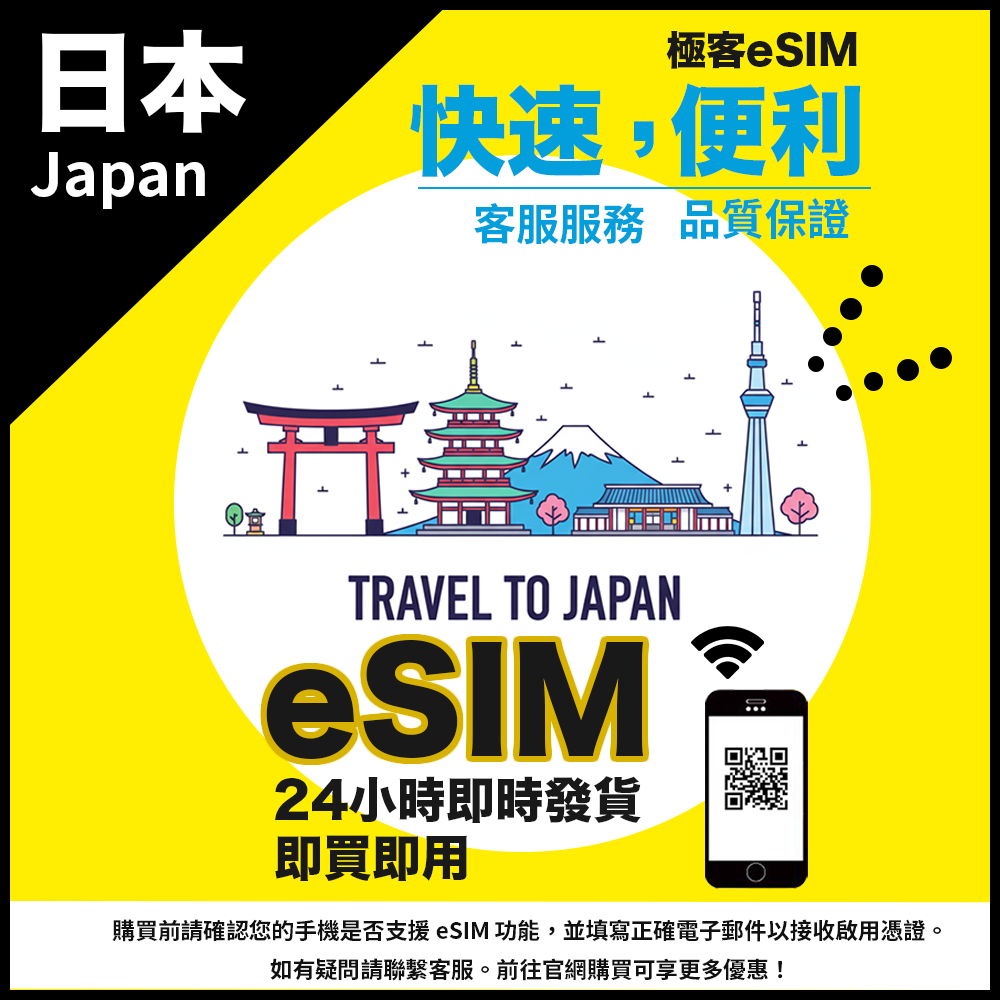
<style>
.page{position:relative;width:1000px;height:1000px;background:#ffee02}
.page>*{position:absolute;margin:0}
.t1{font:109.8px "HiraKakuStdN-W8";color:#ffffff}
.t2{font:40.1px "HiraKakuStdN-W8";color:#191919}
.t3{font:98.2px "HiraKakuStdN-W8";color:#039fdc}
.t4{font:59.4px "SourceHanSansTC-Bold";color:#ffffff}
.t5{font:43.1px "SourceHanSansTC-Bold";color:#039fdc}
.t6{font:137.6px "HiraKakuStdN-W8";color:#191919}
.t7{font:48.9px "HiraKakuStdN-W8";color:#191919}
.t8{font:22.7px "SourceHanSansTC-Bold";color:#101010}
</style>
<div class="page">
<p class="t1" style="left:41px;top:29px;width:205px;height:104px">日本</p>
<p class="t2" style="left:666px;top:31px;width:191px;height:38px">極客eSIM</p>
<p class="t3" style="left:410px;top:83px;width:451px;height:95px">快速  便利</p>
<p class="t3" style="left:634px;top:121px;width:20px;height:37px">,</p>
<p class="t4" style="left:30px;top:152px;width:175px;height:57px">Japan</p>
<p class="t5" style="left:681px;top:198px;width:169px;height:42px">品質保證</p>
<p class="t5" style="left:474px;top:202px;width:171px;height:42px">客服服務</p>
<p class="t6" style="left:266px;top:639px;width:378px;height:120px">eSIM</p>
<p class="t7" style="left:275px;top:776px;width:366px;height:47px">24小時即時發貨</p>
<p class="t7" style="left:275px;top:835px;width:192px;height:46px">即買即用</p>
<p class="t8" style="left:112px;top:919px;width:829px;height:62px;text-align:center">購買前請確認您的手機是否支援 eSIM 功能，並填寫正確電子郵件以接收啟用憑證。<br>如有疑問請聯繫客服。前往官網購買可享更多優惠！</p>
</div>
